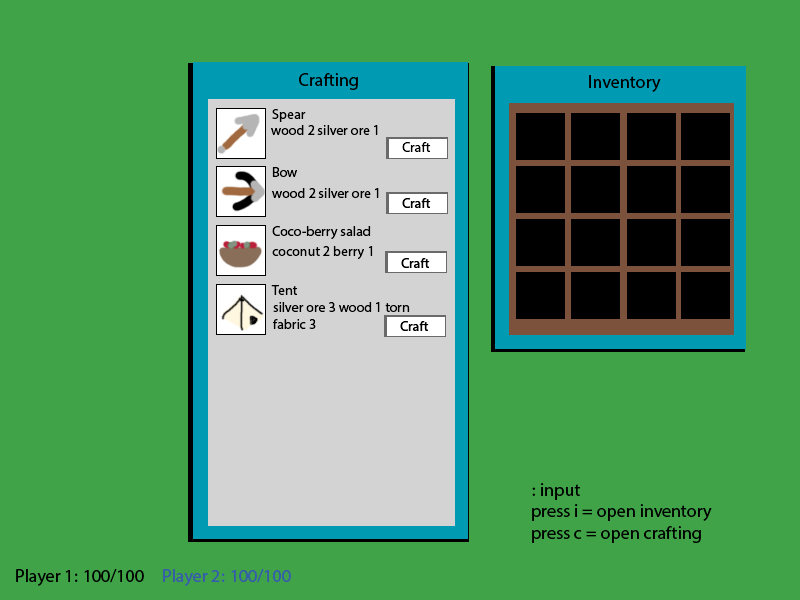
<style>
.page{position:relative;width:800px;height:600px;background:#40a348}
.page>*{position:absolute;margin:0}
.t1{font:18px "MyriadHebrew-Regular";color:#000000}
.t2{font:14px "MyriadHebrew-Regular";color:#000000}
.t3{font:18px "MyriadHebrew-Regular";color:#355ba9}
</style>
<div class="page">
<p class="t1" style="left:299px;top:73px;width:59px;height:17px">Crafting</p>
<p class="t1" style="left:589px;top:75px;width:72px;height:17px">Inventory</p>
<p class="t2" style="left:272px;top:109px;width:34px;height:13px;text-align:right">Spear<br>1</p>
<p class="t2" style="left:271px;top:125px;width:107px;height:10px">1 wood 2 silver ore</p>
<p class="t2" style="left:402px;top:142px;width:29px;height:10px">Craft</p>
<p class="t2" style="left:272px;top:167px;width:25px;height:10px">Bow</p>
<p class="t2" style="left:272px;top:188px;width:107px;height:10px">wood 2 silver ore 1</p>
<p class="t2" style="left:272px;top:226px;width:99px;height:13px">Coco-berry salad</p>
<p class="t2" style="left:272px;top:246px;width:101px;height:13px">1 coconut 2 berry</p>
<p class="t2" style="left:271px;top:285px;width:27px;height:10px">Tent</p>
<p class="t2" style="left:273px;top:302px;width:137px;height:27px;text-align:right">silver ore 3 wood 1 torn fabric 3</p>
<p class="t1" style="left:532px;top:483px;width:180px;height:60px;text-align:right">input : <br>press i = open inventory<br>press c = open crafting</p>
<p class="t1" style="left:16px;top:569px;width:128px;height:17px">Player 1: 100/100</p>
<p class="t3" style="left:163px;top:569px;width:128px;height:17px">Player 2: 100/100</p>
</div>
